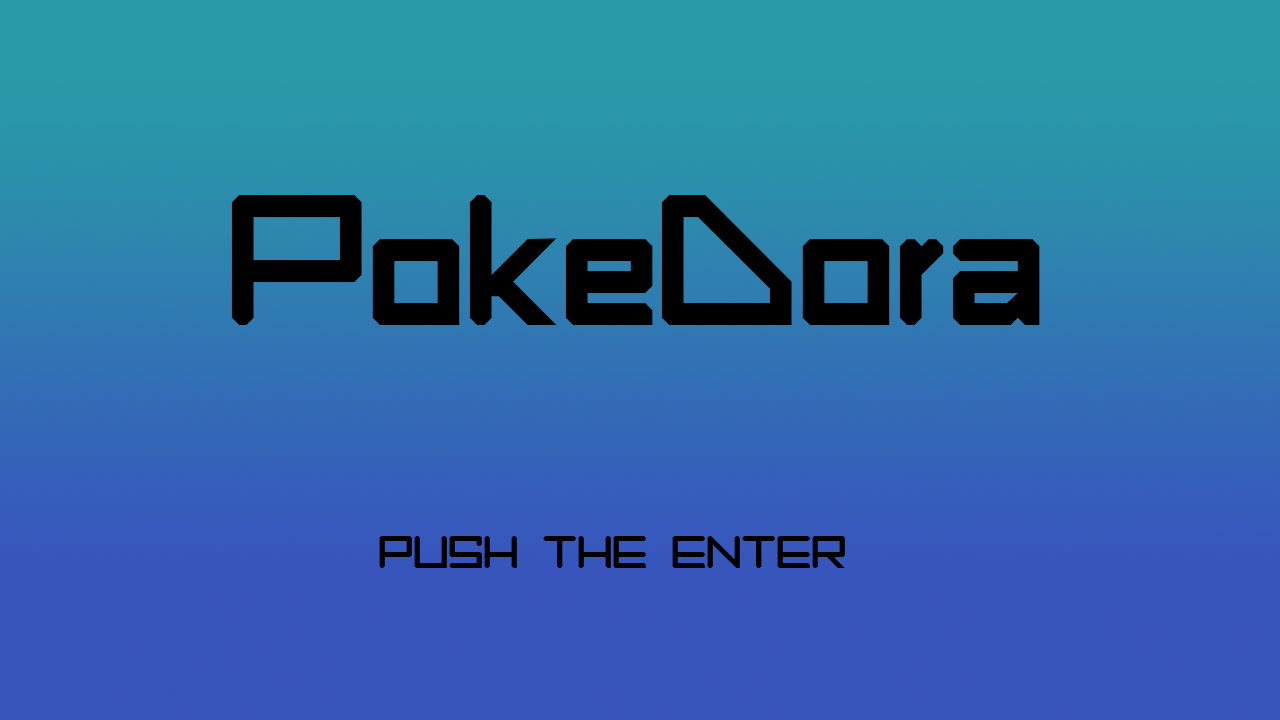
<style>
.page{position:relative;width:1280px;height:720px}
.page>*{position:absolute;margin:0}
.t1{font:200px "MurderOfMayday";letter-spacing:-0.01em;color:#000000}
.t2{font:50px "MurderOfMayday";letter-spacing:-0.01em;color:#000000}
</style>
<div class="page">
<p class="t1" style="left:231px;top:195px;width:809px;height:130px">PokeDora</p>
<p class="t2" style="left:379px;top:536px;width:466px;height:32px">PUSH THE ENTER</p>
</div>
